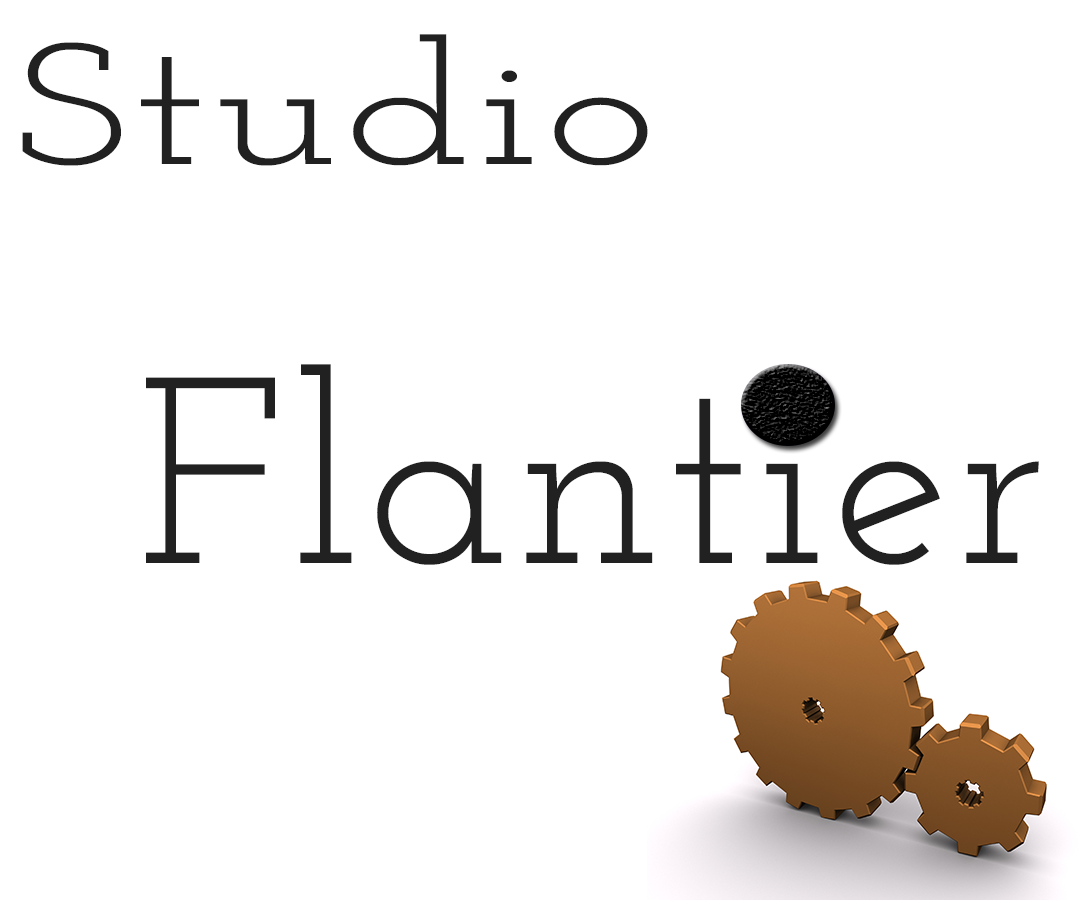
<style>
.page{position:relative;width:1080px;height:900px;background:#ffffff}
.page>*{position:absolute;margin:0}
.t1{font:172.7px "JosefinSlab";letter-spacing:0.025em;color:#212121;scale:1.36 1}
.t2{font:264.7px "JosefinSlab";letter-spacing:0.025em;color:#212121}
</style>
<div class="page">
<p class="t1" style="left:22px;top:34px;width:626px;height:132px">Studio</p>
<p class="t2" style="left:146px;top:364px;width:893px;height:201px">Flantier</p>
</div>
